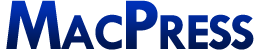
<style>
.page{position:relative;width:265px;height:55px;background:#ffffff}
.page>*{position:absolute;margin:0}
.t1{font:75px "TwCenMT-Bold";letter-spacing:-0.05em;font-variant:small-caps}
</style>
<div class="page">
<p class="t1" style="left:6px;top:0px;width:248px;height:50px">MacPress</p>
</div>
